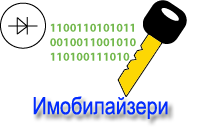
<style>
.page{position:relative;width:200px;height:130px;background:#ffffff}
.page>*{position:absolute;margin:0}
.t1{font:24px "ArialNarrow";color:#032cfd}
</style>
<div class="page">
<p class="t1" style="left:33px;top:96px;width:135px;height:23px">Имобилайзери</p>
</div>
